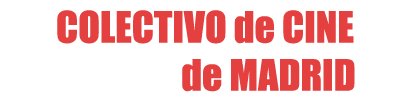
<style>
.page{position:relative;width:412px;height:101px;background:#ffffff}
.page>*{position:absolute;margin:0}
.t1{font:40px "Impact";color:#e44040}
</style>
<div class="page">
<p class="t1" style="left:57px;top:10px;width:298px;height:82px;text-align:center">COLECTIVO de CINE <br>                  de MADRID</p>
</div>
